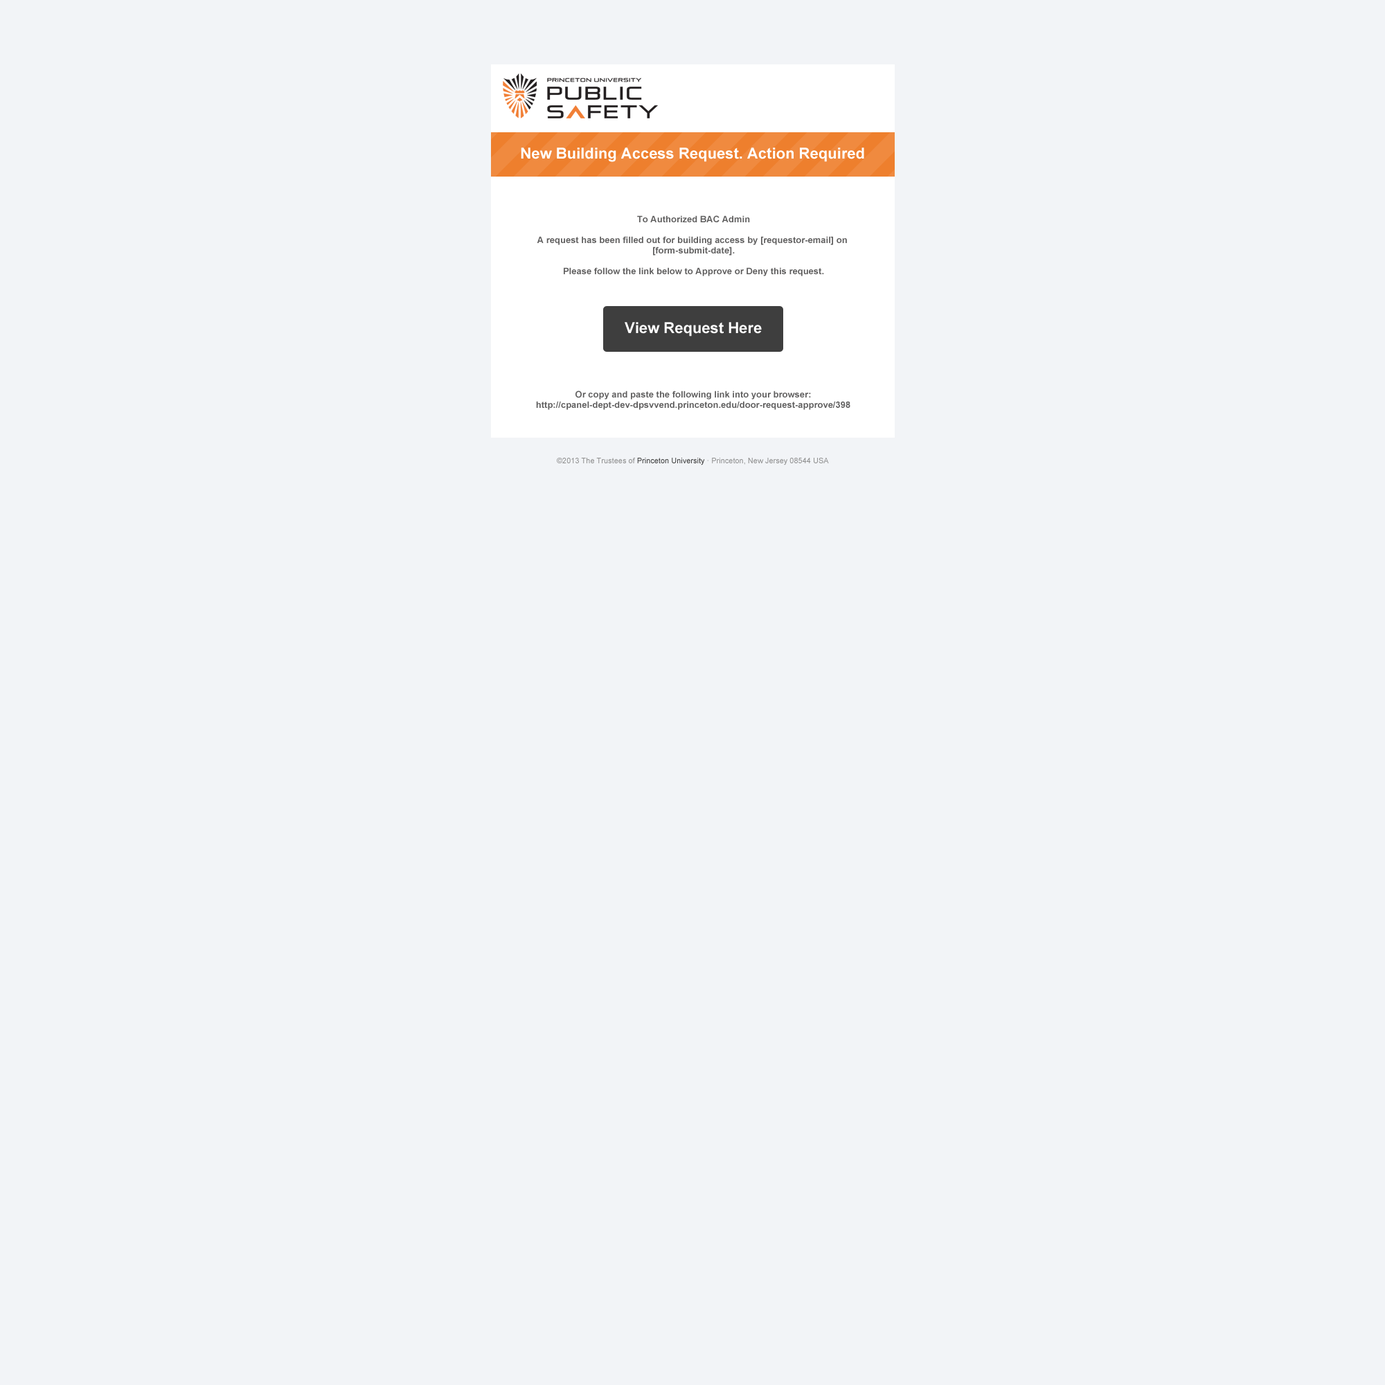
<style>
.page{position:relative;width:1385px;height:1385px;background:#f2f4f7}
.page>*{position:absolute;margin:0}
.t1{font:15.2px "Arial-BoldMT";color:#ffffff}
.t2{font:9px/10.4px "Arial-BoldMT";color:#5f5e5e}
.t3{font:7.6px "ArialMT";color:#8f8f8f}
.t4{font:7.6px "ArialMT";color:#3e3e3e}
</style>
<div class="page">
<p class="t1" style="left:521px;top:147px;width:343px;height:15px">New Building Access Request. Action Required</p>
<p class="t2" style="left:537px;top:215px;width:310px;height:61px;text-align:center">To Authorized BAC Admin<br><br>A request has been filled out for building access by [requestor-email] on <br>[form-submit-date].<br><br>Please follow the link below to Approve or Deny this request.</p>
<p class="t1" style="left:624px;top:322px;width:138px;height:14px">View Request Here</p>
<p class="t2" style="left:536px;top:390px;width:314px;height:20px;text-align:center">Or copy and paste the following link into your browser:<br>http://cpanel-dept-dev-dpsvvend.princeton.edu/door-request-approve/398</p>
<p class="t3" style="left:557px;top:458px;width:272px;height:7px">©2013 The Trustees of <span class="t4">Princeton University</span> · Princeton, New Jersey 08544 USA</p>
</div>
